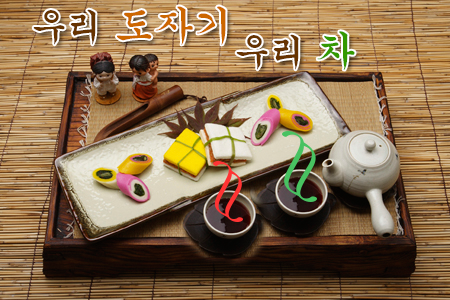
<style>
.page{position:relative;width:450px;height:300px}
.page>*{position:absolute;margin:0}
.t1{font:40px "Gungsuh";color:#cc6600}
.t2{font:36px "Gungsuh";color:#663300}
.t3{font:40px "Gungsuh";color:#339900}
</style>
<div class="page">
<p class="t1" style="left:33px;top:6px;width:193px;height:39px"><span class="t2">우리 </span>도자기</p>
<p class="t2" style="left:236px;top:31px;width:119px;height:39px">우리 <span class="t3">차</span></p>
</div>
